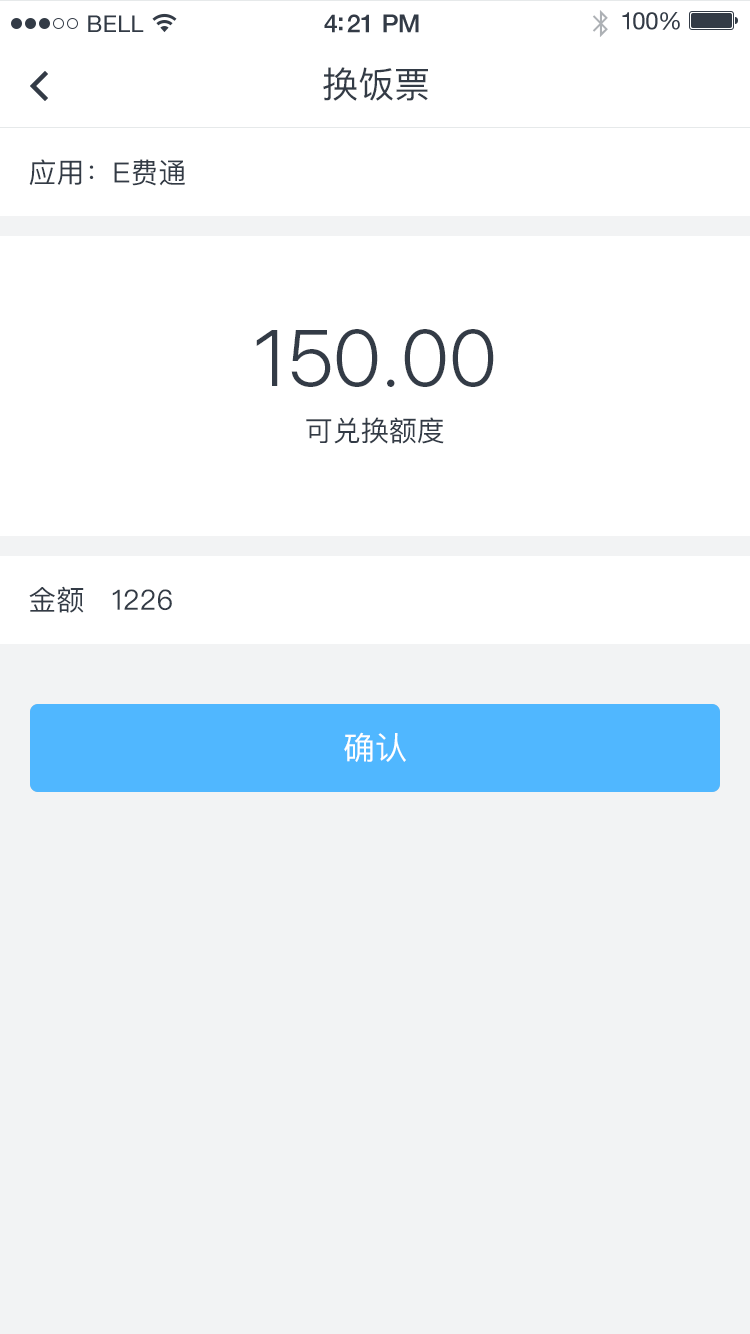
<style>
.page{position:relative;width:750px;height:1334px;background:#f2f3f4}
.page>*{position:absolute;margin:0}
.t1{font:23px "HelveticaNeue";letter-spacing:0.02em;color:#333b46}
.t2{font:25px "HelveticaNeue-Medium";letter-spacing:-0.02em;color:#333b46}
.t3{font:24px "HelveticaNeue";letter-spacing:-0.02em;color:#333b46}
.t4{font:36px "PingFangSC-Regular";color:#333b46}
.t5{font:28px "PingFangSC-Regular";color:#333b46}
.t6{font:80px "SFUIDisplay-Light";color:#333b46}
.t7{font:32px "PingFangSC-Regular";color:#ffffff}
</style>
<div class="page">
<p class="t1" style="left:88px;top:15px;width:56px;height:17px">BELL</p>
<p class="t2" style="left:324px;top:14px;width:95px;height:19px">4:21 PM</p>
<p class="t3" style="left:622px;top:12px;width:58px;height:18px">100%</p>
<p class="t4" style="left:323px;top:67px;width:105px;height:34px">换饭票</p>
<p class="t5" style="left:29px;top:159px;width:156px;height:27px">应用：E费通</p>
<p class="t6" style="left:256px;top:329px;width:238px;height:58px">150.00</p>
<p class="t5" style="left:306px;top:417px;width:138px;height:27px">可兑换额度</p>
<p class="t5" style="left:29px;top:586px;width:55px;height:27px">金额</p>
<p class="t5" style="left:112px;top:589px;width:60px;height:22px">1226</p>
<p class="t7" style="left:344px;top:732px;width:62px;height:30px">确认</p>
</div>
